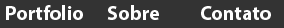
<style>
.page{position:relative;width:284px;height:28px;background:#333333}
.page>*{position:absolute;margin:0}
.t1{font:20px "MyriadPro-Bold";color:#fefefe}
</style>
<div class="page">
<p class="t1" style="left:6px;top:5px;width:77px;height:15px">Portfolio</p>
<p class="t1" style="left:107px;top:5px;width:52px;height:15px">Sobre</p>
<p class="t1" style="left:201px;top:6px;width:70px;height:14px">Contato</p>
</div>
